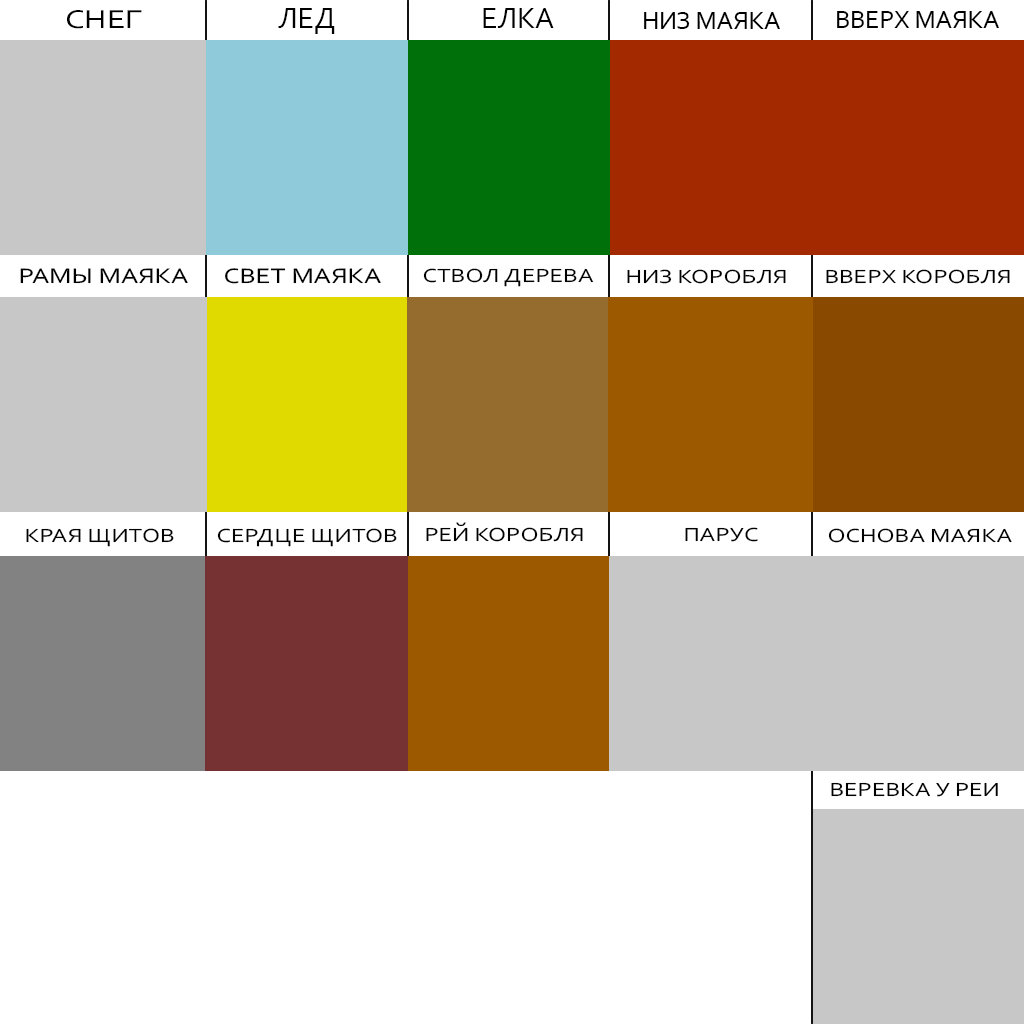
<style>
.page{position:relative;width:1024px;height:1024px;background:#ffffff}
.page>*{position:absolute;margin:0}
.t1{font:26.9px "Corbel";color:#000000;text-transform:uppercase;scale:1.24 1}
.t2{font:30px "Corbel";color:#000000;text-transform:uppercase}
.t3{font:25.6px "Corbel";color:#000000;text-transform:uppercase}
.t4{font:22px "Corbel";color:#000000;text-transform:uppercase;scale:1.24 1}
.t5{font:20px "Corbel";color:#000000;text-transform:uppercase;scale:1.24 1}
</style>
<div class="page">
<p class="t1" style="left:67px;top:10px;width:75px;height:19px">Снег</p>
<p class="t2" style="left:278px;top:8px;width:57px;height:26px">Лед</p>
<p class="t2" style="left:483px;top:8px;width:71px;height:20px">Елка</p>
<p class="t3" style="left:644px;top:12px;width:136px;height:17px">Низ маяка</p>
<p class="t3" style="left:837px;top:11px;width:162px;height:17px">вверх маяка</p>
<p class="t4" style="left:20px;top:268px;width:168px;height:16px">Рамы маяка</p>
<p class="t4" style="left:225px;top:268px;width:156px;height:16px">Свет маяка</p>
<p class="t5" style="left:423px;top:268px;width:171px;height:19px">Ствол дерева</p>
<p class="t5" style="left:627px;top:269px;width:159px;height:15px">низ коробля</p>
<p class="t5" style="left:826px;top:269px;width:184px;height:15px">вверх коробля</p>
<p class="t5" style="left:26px;top:528px;width:148px;height:19px">Края щитов</p>
<p class="t5" style="left:217px;top:528px;width:180px;height:19px">сердце щитов</p>
<p class="t5" style="left:426px;top:522px;width:157px;height:20px">рей коробля</p>
<p class="t5" style="left:685px;top:527px;width:73px;height:15px">ПАРУС</p>
<p class="t5" style="left:828px;top:528px;width:184px;height:15px">Основа маяка</p>
<p class="t5" style="left:831px;top:782px;width:167px;height:15px">веревка у реи</p>
</div>
